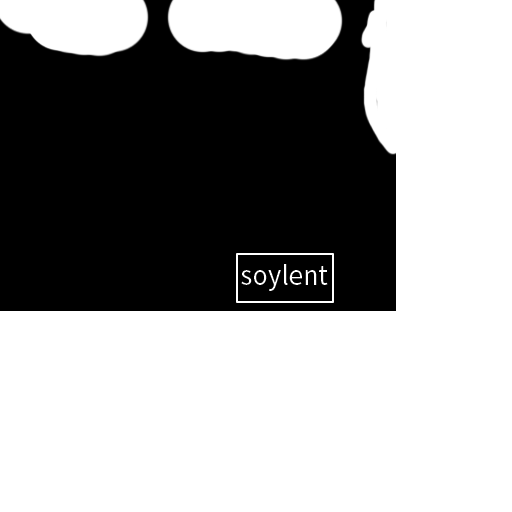
<style>
.page{position:relative;width:512px;height:512px;background:#ffffff}
.page>*{position:absolute;margin:0}
.t1{font:29.1px "SourceSansPro-Regular";color:#ffffff}
</style>
<div class="page">
<p class="t1" style="left:241px;top:264px;width:87px;height:27px">soylent</p>
</div>
